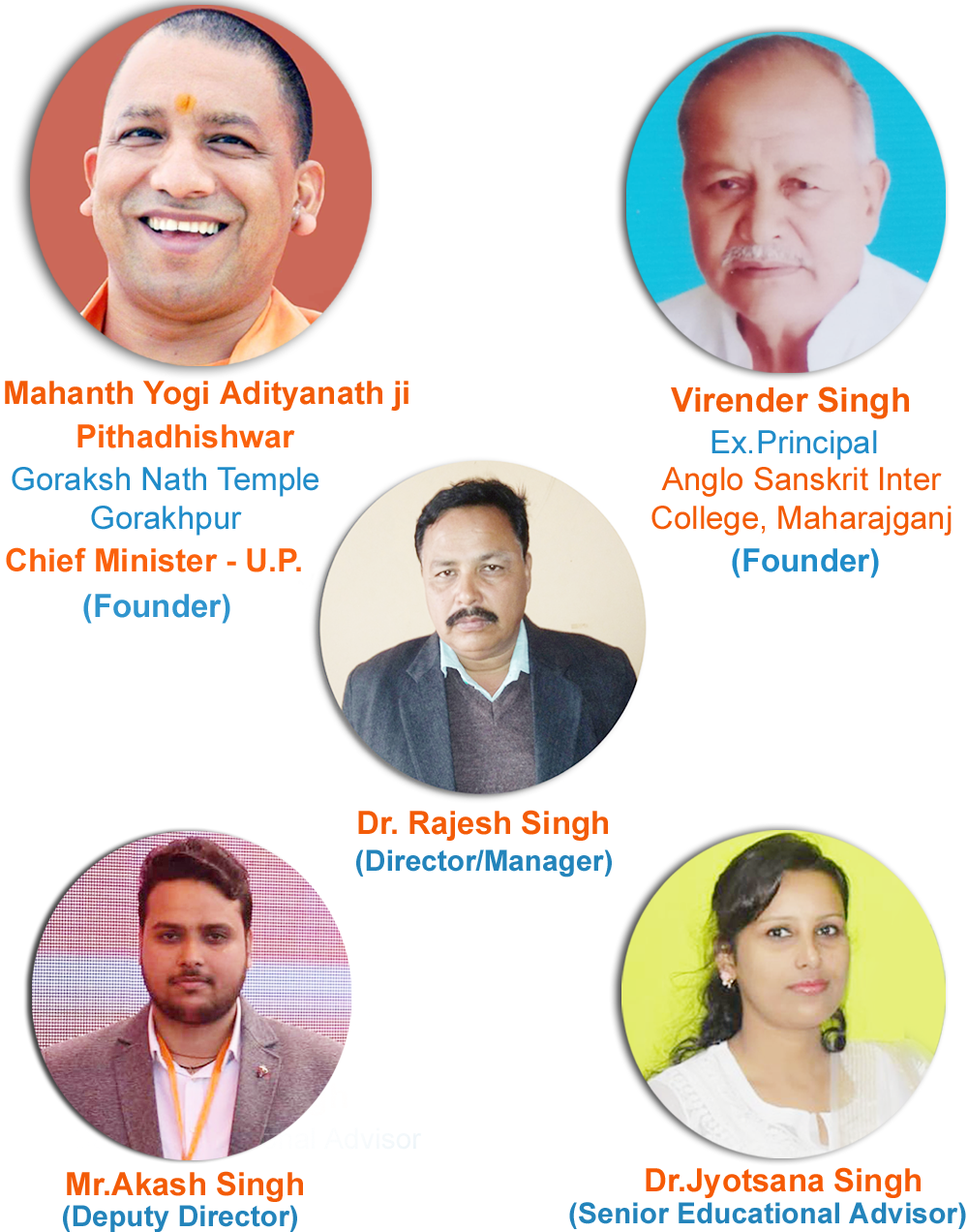
<style>
.page{position:relative;width:968px;height:1232px;background:#ffffff}
.page>*{position:absolute;margin:0}
.t1{font:32px "Arial-BoldMT";color:#f35b07}
.t2{font:33.9px "Arial-BoldMT";color:#f35b07}
.t3{font:32px "Arial-BoldMT";color:#fb620d}
.t4{font:32px "ArialMT";color:#208cc9}
.t5{font:32px "ArialMT";color:#f35b07}
.t6{font:32px "Arial-BoldMT";color:#208cc9}
.t7{font:32px "Arial-BoldMT";color:#3095ce}
.t8{font:29px "Arial-BoldMT";color:#2384bb}
.t9{font:32px "Arial-BoldMT";color:#f65a04}
</style>
<div class="page">
<p class="t1" style="left:5px;top:381px;width:404px;height:30px">Mahanth Yogi Adityanath ji</p>
<p class="t2" style="left:671px;top:386px;width:238px;height:33px">Virender Singh</p>
<p class="t3" style="left:77px;top:424px;width:218px;height:24px">Pithadhishwar</p>
<p class="t4" style="left:712px;top:430px;width:165px;height:30px">Ex.Principal</p>
<p class="t4" style="left:12px;top:467px;width:307px;height:68px;text-align:center">Goraksh Nath Temple <br>Gorakhpur</p>
<p class="t5" style="left:652px;top:467px;width:300px;height:68px;text-align:center">Anglo Sanskrit Inter College, Maharajganj</p>
<p class="t3" style="left:6px;top:547px;width:295px;height:25px">Chief Minister - U.P.</p>
<p class="t6" style="left:732px;top:548px;width:147px;height:30px">(Founder)</p>
<p class="t7" style="left:83px;top:594px;width:147px;height:30px">(Founder)</p>
<p class="t1" style="left:358px;top:809px;width:250px;height:31px">Dr. Rajesh Singh</p>
<p class="t8" style="left:356px;top:849px;width:256px;height:28px">(Director/Manager)</p>
<p class="t9" style="left:646px;top:1167px;width:275px;height:31px">Dr.Jyotsana Singh</p>
<p class="t1" style="left:67px;top:1171px;width:236px;height:31px">Mr.Akash Singh</p>
<p class="t8" style="left:63px;top:1204px;width:234px;height:29px">(Deputy Director)</p>
<p class="t8" style="left:569px;top:1202px;width:397px;height:27px">(Senior Educational Advisor)</p>
</div>
